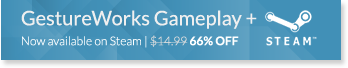
<style>
.page{position:relative;width:348px;height:68px}
.page>*{position:absolute;margin:0}
.t1{font:12px/20px "Lato-Light";color:#ffffff}
.t2{font:20px/20px "Lato-Regular";color:#efefef}
.t3{font:12px/20px "Lato-Light";color:#dddddd}
.t4{font:12px/20px "Lato-Bold";color:#ffffff}
</style>
<div class="page">
<p class="t1" style="left:21px;top:10px;width:236px;height:38px"><span class="t2">GestureWorks Gameplay +<br></span>Now available on Steam | <span class="t3">$14.99 </span><span class="t4">66% OFF</span></p>
</div>
